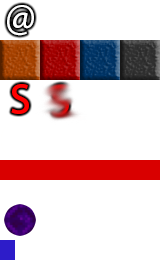
<style>
.page{position:relative;width:160px;height:280px;background:#ffffff}
.page>*{position:absolute;margin:0}
.t1{font:38px "AdobeHeitiStd-Regular";color:#ffffff}
.t2{font:38px "AdobeHeitiStd-Regular";color:#ff0000}
</style>
<div class="page">
<p class="t1" style="left:7px;top:5px;width:27px;height:31px">@</p>
<p class="t2" style="left:11px;top:84px;width:18px;height:30px">S</p>
</div>
